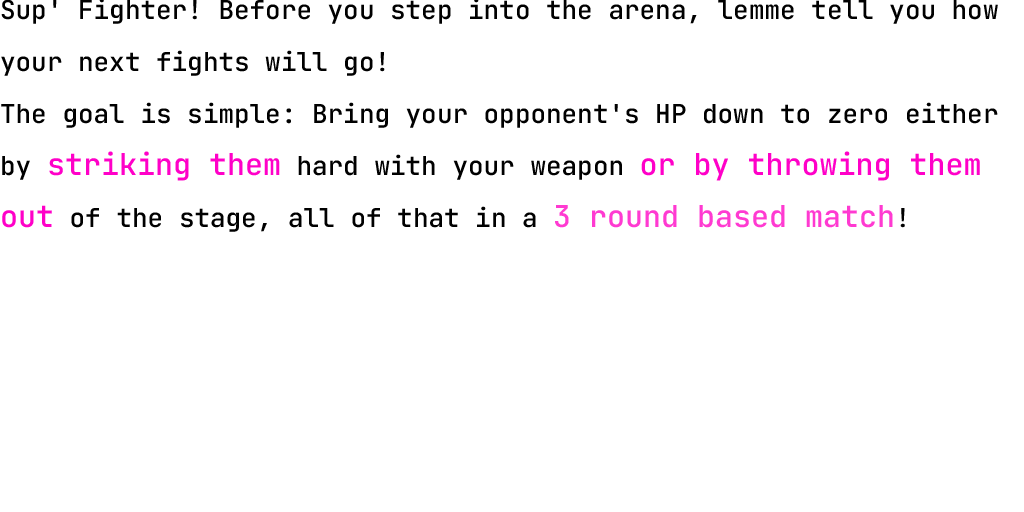
<style>
.page{position:relative;width:1024px;height:512px;background:#ffffff}
.page>*{position:absolute;margin:0}
.t1{font:26px/52px "JetBrainsMonoRoman-Medium";color:#000000}
.t2{font:30px/52px "JetBrainsMonoRoman-Medium";color:#ff00c8}
.t3{font:30px/52px "JetBrainsMonoRoman-Medium";color:#ff3ad1}
</style>
<div class="page">
<p class="t1" style="left:1px;top:0px;width:997px;height:232px">Sup' Fighter! Before you step into the arena, lemme tell you how your next fights will go!<br>The goal is simple: Bring your opponent's HP down to zero either by <span class="t2">striking them</span> hard with your weapon <span class="t2">or by throwing them out</span> of the stage, all of that in a <span class="t3">3 round based match</span>!</p>
</div>
